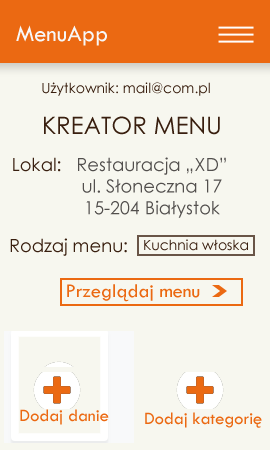
<style>
.page{position:relative;width:270px;height:450px;background:#f7f7ef}
.page>*{position:absolute;margin:0}
.t1{font:24px "TwCenMT-Regular";color:#f7f7f7}
.t2{font:14px "CenturyGothic";color:#391f0f}
.t3{font:24px "CenturyGothic";color:#391f0f}
.t4{font:18px "CenturyGothic";color:#391f0f}
.t5{font:18px "CenturyGothic";color:#524f4d}
.t6{font:20px "TwCenMT-Regular";color:#eb6912}
.t7{font:18px "TwCenMT-Regular";color:#eb6912}
</style>
<div class="page">
<p class="t1" style="left:16px;top:25px;width:91px;height:21px">MenuApp</p>
<p class="t2" style="left:42px;top:82px;width:168px;height:14px">Użytkownik: mail@com.pl</p>
<p class="t3" style="left:44px;top:116px;width:176px;height:19px">KREATOR MENU</p>
<p class="t4" style="left:13px;top:157px;width:48px;height:15px">Lokal:</p>
<p class="t5" style="left:78px;top:157px;width:148px;height:61px;text-align:center">Restauracja „XD”<br>ul. Słoneczna 17<br>15-204 Białystok</p>
<p class="t4" style="left:10px;top:238px;width:117px;height:18px">Rodzaj menu:</p>
<p class="t2" style="left:144px;top:239px;width:104px;height:12px">Kuchnia włoska</p>
<p class="t6" style="left:67px;top:284px;width:133px;height:18px">Przeglądaj menu</p>
<p class="t7" style="left:20px;top:409px;width:89px;height:16px">Dodaj danie</p>
<p class="t7" style="left:145px;top:412px;width:117px;height:16px">Dodaj kategorię</p>
</div>
